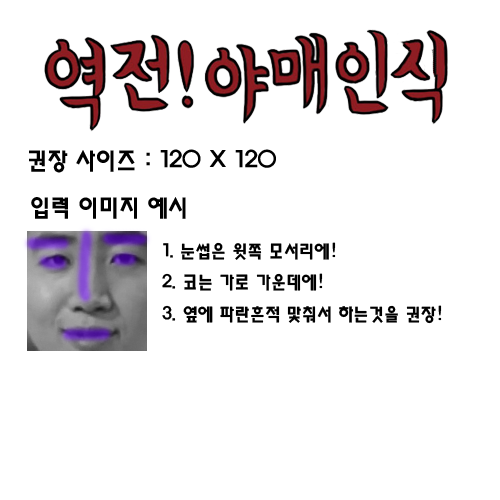
<style>
.page{position:relative;width:500px;height:500px;background:#ffffff}
.page>*{position:absolute;margin:0}
.t1{font:24px "HaanYHeadM";color:#000000}
.t2{font:18px "HaanYHeadM";color:#000000}
</style>
<div class="page">
<p class="t1" style="left:29px;top:149px;width:247px;height:24px">권장 사이즈 : 120 X 120</p>
<p class="t1" style="left:31px;top:197px;width:155px;height:22px">입력 이미지 예시</p>
<p class="t2" style="left:162px;top:242px;width:280px;height:82px">1. 눈썹은 윗쪽 모서리에!<br>2. 코는 가로 가운데에!<br>3. 옆에 파란흔적 맟춰서 하는것을 권장!</p>
</div>
